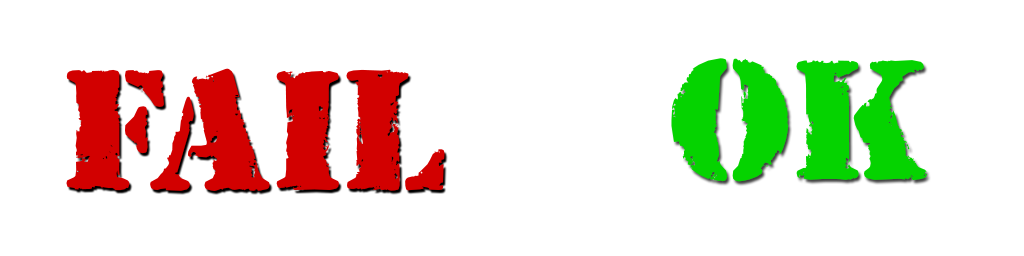
<style>
.page{position:relative;width:1024px;height:256px;background:#ffffff}
.page>*{position:absolute;margin:0}
.t1{font:180px "RubberStampLetPlain";color:#05d300}
.t2{font:180px "RubberStampLetPlain";color:#d20000}
</style>
<div class="page">
<p class="t1" style="left:671px;top:58px;width:256px;height:124px">OK</p>
<p class="t2" style="left:66px;top:68px;width:379px;height:123px">FAIL</p>
</div>
